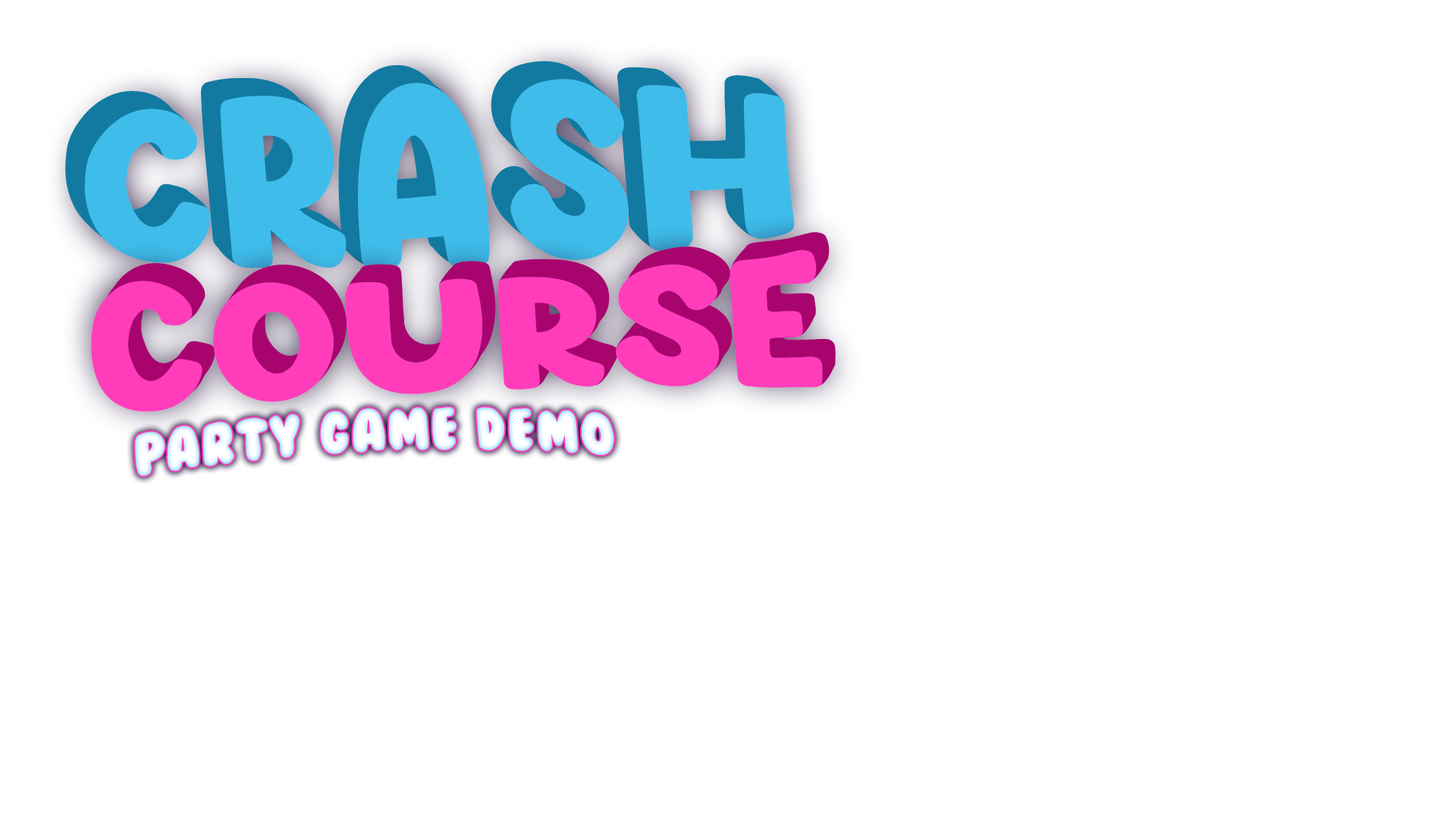
<style>
.page{position:relative;width:1456px;height:819px;background:#ffffff}
.page>*{position:absolute;margin:0}
.t1{font:170.4px "Lemon-Days";letter-spacing:0.025em;scale:1.33 1}
.t2{font:170.4px "Lemon-Days";letter-spacing:0.025em;color:#3fbcea;scale:1.33 1}
.t3{font:175px "Lemon-Days";letter-spacing:0.025em;scale:1.14 1}
.t4{font:175px "Lemon-Days";letter-spacing:0.025em;color:#ff3dbb;scale:1.14 1}
.t5{font:54.4px "BubbleGum";letter-spacing:0.025em}
</style>
<div class="page">
<p class="t1" style="left:65px;top:61px;width:710px;height:190px;rotate:-2deg">CRASH</p>
<p class="t2" style="left:71px;top:67px;width:711px;height:191px;rotate:-2deg">CRASH</p>
<p class="t2" style="left:80px;top:74px;width:709px;height:190px;rotate:-2deg">CRASH</p>
<p class="t2" style="left:84px;top:79px;width:711px;height:190px;rotate:-2deg">CRASH</p>
<p class="t3" style="left:104px;top:232px;width:732px;height:162px;rotate:-2deg">Course</p>
<p class="t4" style="left:96px;top:245px;width:731px;height:162px;rotate:-2deg">Course</p>
<p class="t4" style="left:99px;top:238px;width:732px;height:162px;rotate:-2deg">Course</p>
<p class="t4" style="left:91px;top:249px;width:732px;height:163px;rotate:-2deg">Course</p>
<p class="t5" style="left:135px;top:407px;width:479px;height:69px;rotate:-2deg">Party Game Demo</p>
</div>
